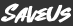
<style>
.page{position:relative;width:73px;height:26px;background:#333333}
.page>*{position:absolute;margin:0}
.t1{font:30.3px "QuickzagRegular";color:#ffffff;font-weight:bold;scale:1.22 1}
</style>
<div class="page">
<p class="t1" style="left:1px;top:3px;width:71px;height:20px">SaveUs</p>
</div>
